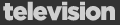
<style>
.page{position:relative;width:120px;height:25px;background:#333333}
.page>*{position:absolute;margin:0}
.t1{font:25px "GothamBlack";letter-spacing:-0.05em;color:#cfcfcf}
</style>
<div class="page">
<p class="t1" style="left:3px;top:1px;width:112px;height:20px">television</p>
</div>
